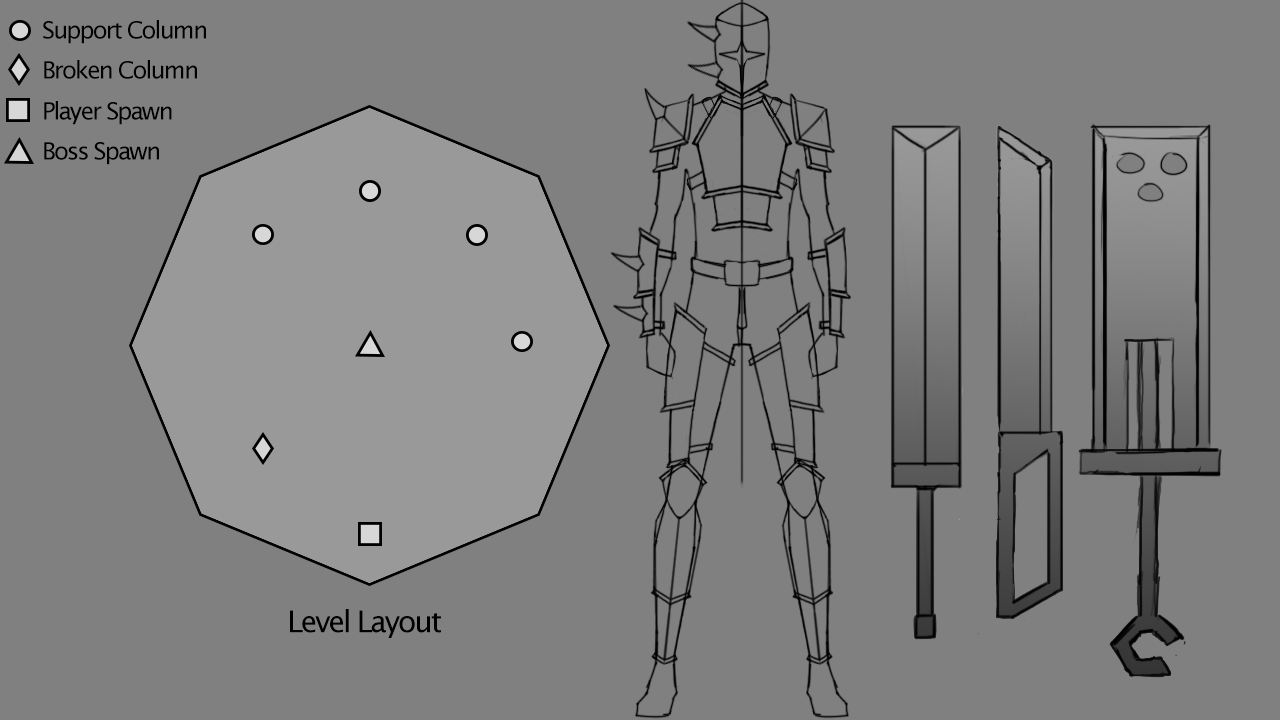
<style>
.page{position:relative;width:1280px;height:720px;background:#808080}
.page>*{position:absolute;margin:0}
.t1{font:24px "LucidaSans";letter-spacing:-0.075em;color:#000000}
.t2{font:30px "LucidaSans";letter-spacing:-0.075em;color:#000000}
</style>
<div class="page">
<p class="t1" style="left:43px;top:20px;width:163px;height:24px">Support Column</p>
<p class="t1" style="left:44px;top:60px;width:153px;height:19px">Broken Column</p>
<p class="t1" style="left:44px;top:101px;width:128px;height:24px">Player Spawn</p>
<p class="t1" style="left:44px;top:142px;width:115px;height:23px">Boss Spawn</p>
<p class="t2" style="left:290px;top:609px;width:151px;height:29px">Level Layout</p>
</div>
